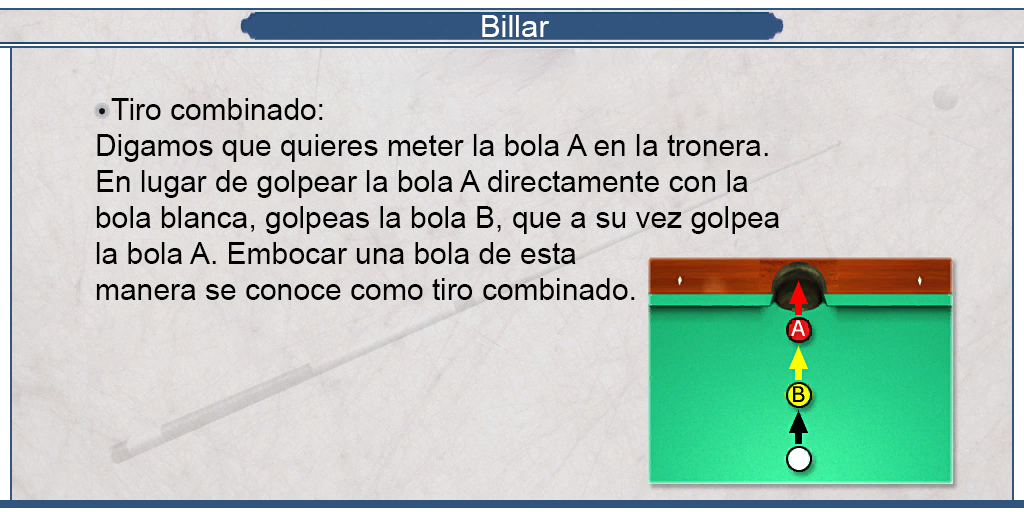
<style>
.page{position:relative;width:1024px;height:512px}
.page>*{position:absolute;margin:0}
.t1{font:30.8px "ArialMT";color:#ffffff}
.t2{font:30px "ArialMT";color:#000000}
</style>
<div class="page">
<p class="t1" style="left:482px;top:15px;width:68px;height:22px">Billar</p>
<p class="t2" style="left:96px;top:98px;width:683px;height:202px;text-align:justify">Tiro combinado:<br>Digamos que quieres meter la bola A en la tronera.<br>En lugar de golpear la bola A directamente con la<br>bola blanca, golpeas la bola B, que a su vez golpea<br>la bola A. Embocar una bola de esta<br>manera se conoce como tiro combinado.</p>
</div>
